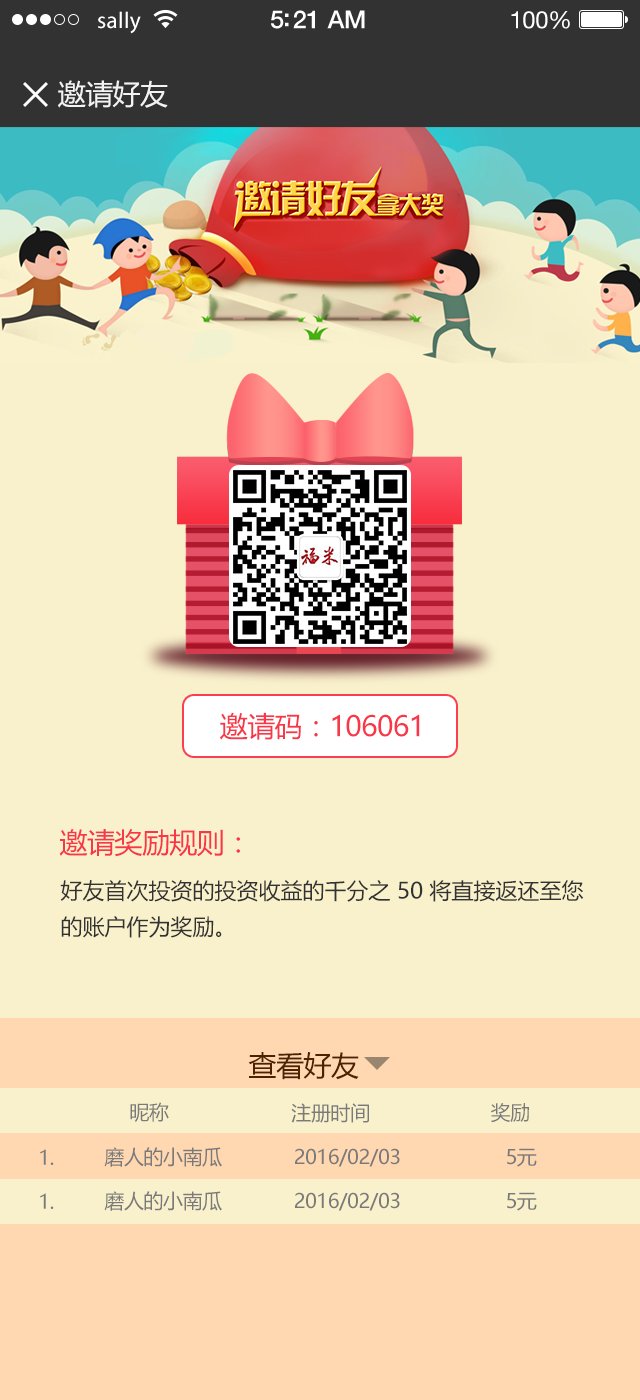
<style>
.page{position:relative;width:640px;height:1400px;background:#f9f1cc}
.page>*{position:absolute;margin:0}
.t1{font:23px "MyriadPro-Regular";letter-spacing:0.02em;color:#ffffff}
.t2{font:25px "HelveticaNeue-Medium";letter-spacing:-0.02em;color:#ffffff}
.t3{font:24px "HelveticaNeue";letter-spacing:-0.02em;color:#ffffff}
.t4{font:28px "MicrosoftYaHei";letter-spacing:-0.02em;color:#f3f3f3}
.t5{font:28px "MicrosoftYaHei";letter-spacing:-0.02em;color:#f83748}
.t6{font:22px/36px "MicrosoftYaHei";color:#323232}
.t7{font:22px "MicrosoftYaHei";color:#323232}
.t8{font:28px "MicrosoftYaHei";letter-spacing:-0.02em;color:#4f2100}
.t9{font:20px "MicrosoftYaHei";letter-spacing:-0.02em;color:#7a7a7a}
</style>
<div class="page">
<p class="t1" style="left:98px;top:11px;width:43px;height:23px">sally</p>
<p class="t2" style="left:271px;top:10px;width:94px;height:19px">5:21 AM</p>
<p class="t3" style="left:511px;top:11px;width:59px;height:18px">100%</p>
<p class="t4" style="left:58px;top:80px;width:110px;height:28px">邀请好友</p>
<p class="t5" style="left:220px;top:712px;width:200px;height:28px">邀请码：106061</p>
<p class="t5" style="left:59px;top:829px;width:181px;height:28px">邀请奖励规则：</p>
<p class="t6" style="left:60px;top:880px;width:524px;height:58px">好友首次投资的投资收益的千分之 50 将直接返还至您的账户作为奖励<span class="t7">。</span></p>
<p class="t8" style="left:248px;top:1052px;width:111px;height:28px">查看好友</p>
<p class="t9" style="left:130px;top:1102px;width:39px;height:20px">昵称</p>
<p class="t9" style="left:291px;top:1103px;width:78px;height:20px">注册时间</p>
<p class="t9" style="left:491px;top:1103px;width:38px;height:20px">奖励</p>
<p class="t9" style="left:40px;top:1149px;width:14px;height:16px">1.</p>
<p class="t9" style="left:104px;top:1147px;width:433px;height:20px">磨人的小南瓜             2016/02/03                   5元</p>
<p class="t9" style="left:40px;top:1193px;width:14px;height:16px">1.</p>
<p class="t9" style="left:104px;top:1191px;width:433px;height:20px">磨人的小南瓜             2016/02/03                   5元</p>
</div>
